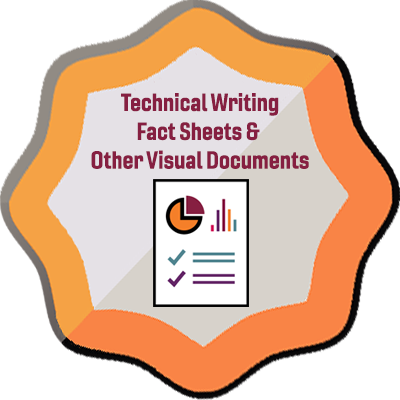
<style>
.page{position:relative;width:400px;height:400px;background:#ffffff}
.page>*{position:absolute;margin:0}
.t1{font:24px "Gineso-ConBol";color:#861f41}
</style>
<div class="page">
<p class="t1" style="left:91px;top:93px;width:218px;height:76px;text-align:center">Technical Writing<br>Fact Sheets &amp; <br>Other Visual Documents</p>
</div>
